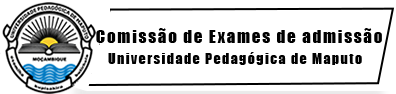
<style>
.page{position:relative;width:396px;height:94px;background:#ffffff}
.page>*{position:absolute;margin:0}
.t1{font:17px "Impact";letter-spacing:0.1em;color:#000000}
.t2{font:14px "Impact";letter-spacing:0.1em;color:#000000}
</style>
<div class="page">
<p class="t1" style="left:96px;top:28px;width:286px;height:15px">Comissão de Exames de admissão</p>
<p class="t2" style="left:108px;top:52px;width:254px;height:13px">Universidade Pedagógica de Maputo</p>
</div>
